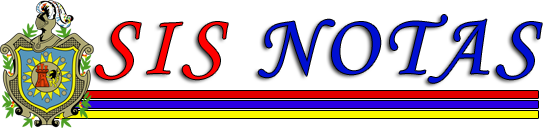
<style>
.page{position:relative;width:550px;height:129px;background:#ffffff}
.page>*{position:absolute;margin:0}
.t1{font:87.5px "MonotypeCorsiva";letter-spacing:0.08em;color:#000fd4}
.t2{font:87.5px "MonotypeCorsiva";letter-spacing:0.08em;color:#ff0000}
</style>
<div class="page">
<p class="t1" style="left:95px;top:15px;width:447px;height:68px"><span class="t2">SIS </span>NOTAS</p>
</div>
